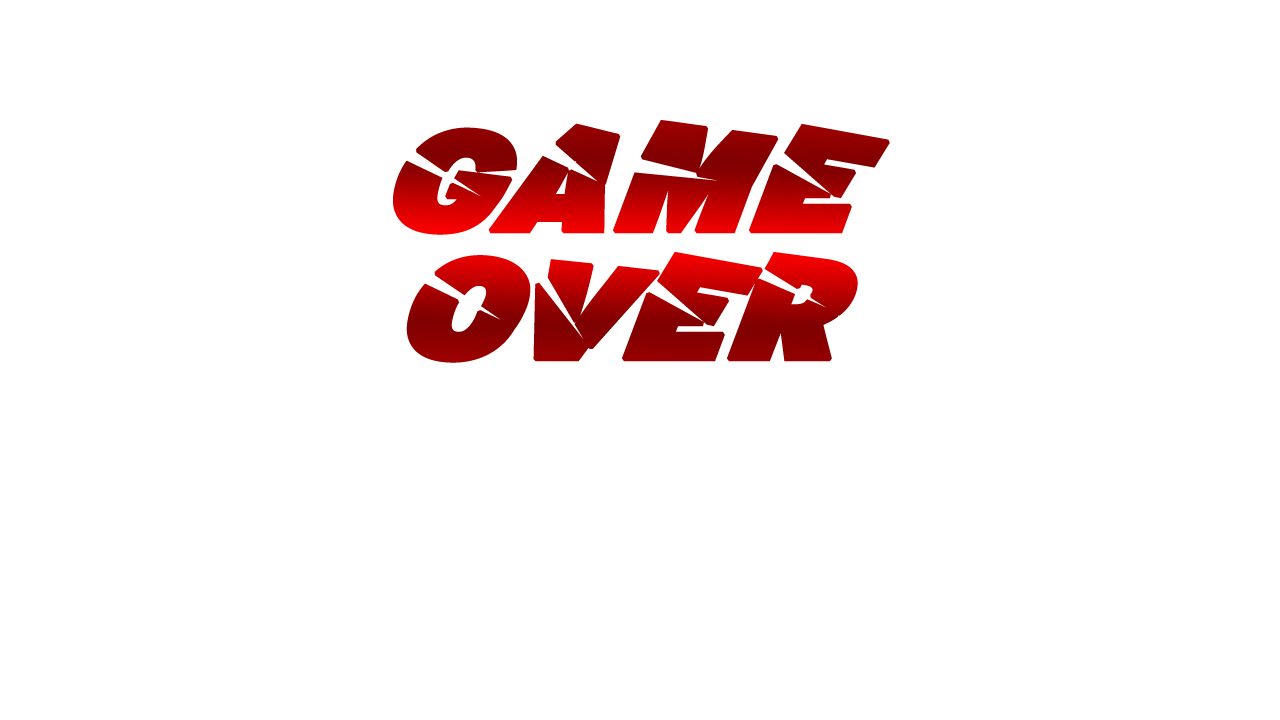
<style>
.page{position:relative;width:1280px;height:720px;background:#ffffff}
.page>*{position:absolute;margin:0}
.t1{font:152px/128px "A-Cuchillada";font-weight:bold;font-style:italic}
</style>
<div class="page">
<p class="t1" style="left:393px;top:120px;width:497px;height:243px;text-align:center">GAME <br>OVER</p>
</div>
